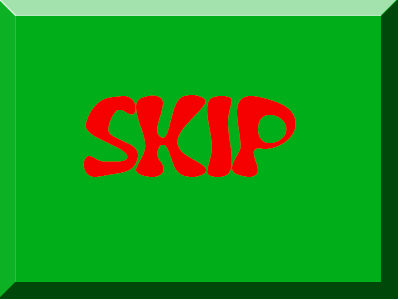
<style>
.page{position:relative;width:400px;height:300px;background:#00ae19}
.page>*{position:absolute;margin:0}
.t1{font:100px "Flubber";color:#f50101}
</style>
<div class="page">
<p class="t1" style="left:83px;top:95px;width:213px;height:82px">SKIP</p>
</div>
